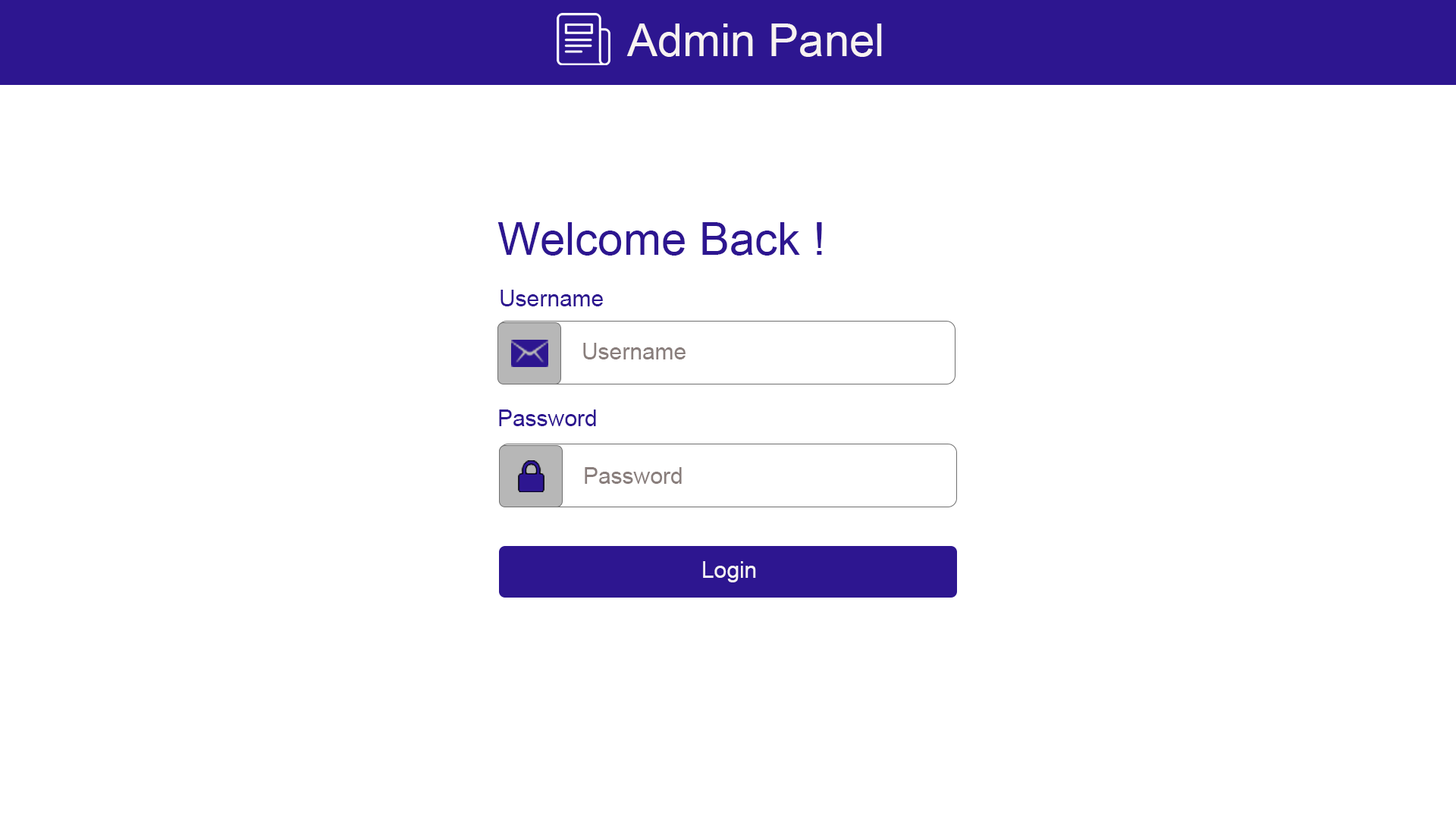
<style>
.page{position:relative;width:1456px;height:819px;background:#ffffff}
.page>*{position:absolute;margin:0}
.t1{font:45.5px "ArialMT";color:#f8f2f1}
.t2{font:45.5px "ArialMT";color:#2d1690}
.t3{font:22.7px "ArialMT";color:#2d1690}
.t4{font:22.7px "ArialMT";color:#897e7c}
.t5{font:22.7px "ArialMT";color:#f7f4f4}
</style>
<div class="page">
<p class="t1" style="left:626px;top:24px;width:256px;height:33px">Admin Panel</p>
<p class="t2" style="left:497px;top:222px;width:325px;height:34px">Welcome Back !</p>
<p class="t3" style="left:500px;top:290px;width:103px;height:16px">Username</p>
<p class="t4" style="left:583px;top:343px;width:103px;height:16px">Username</p>
<p class="t3" style="left:499px;top:409px;width:97px;height:17px">Password</p>
<p class="t4" style="left:585px;top:467px;width:97px;height:17px">Password</p>
<p class="t5" style="left:703px;top:561px;width:53px;height:21px">Login</p>
</div>
